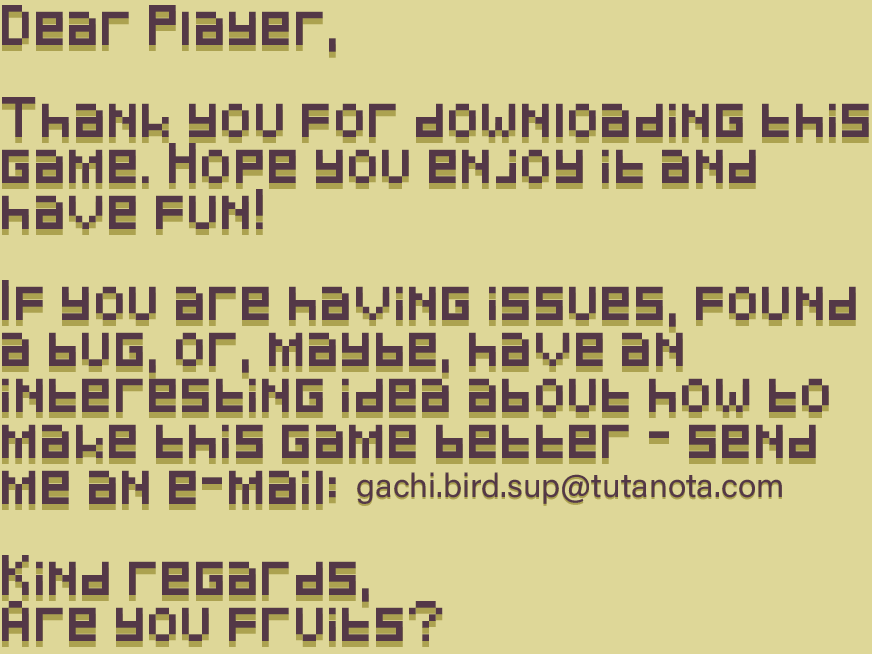
<style>
.page{position:relative;width:872px;height:654px;background:#ded798}
.page>*{position:absolute;margin:0}
.t1{font:33.3px/45.8px "Pixeled";color:#543847}
.t2{font:33.3px "AcuminConcept-Regular";color:#543847}
</style>
<div class="page">
<p class="t1" style="left:2px;top:5px;width:867px;height:636px">Dear Player,<br><br>Thank you for downloading this<br>game. Hope you enjoy it and<br>have fun!<br><br>If you are having issues, found <br>a bug, or, maybe, have an<br>interesting idea about how to<br>make this game better - send <br>me an e-mail:<br><br>Kind regards,<br>Are you fruits?</p>
<p class="t2" style="left:357px;top:472px;width:425px;height:32px">gachi.bird.sup@tutanota.com</p>
</div>
